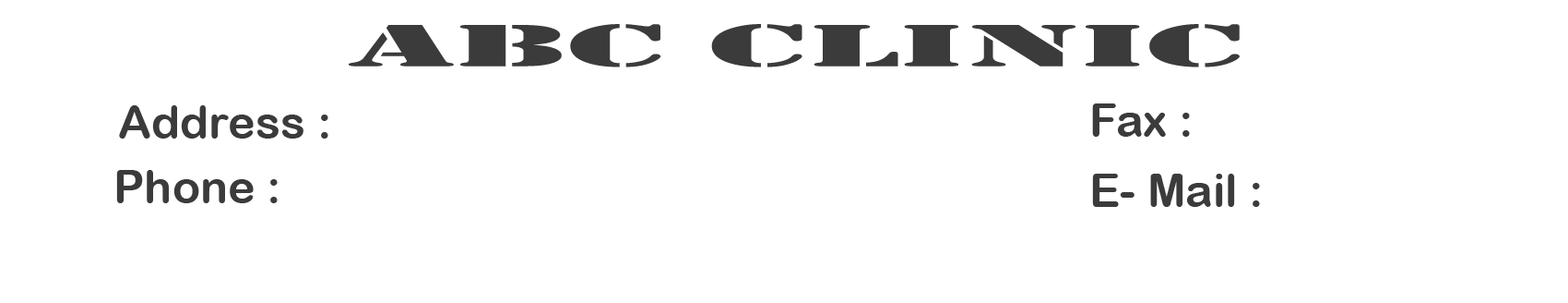
<style>
.page{position:relative;width:1568px;height:303px;background:#ffffff}
.page>*{position:absolute;margin:0}
.t1{font:61.5px "Stencil";color:#3b3b3b;scale:2.76 1}
.t2{font:46.1px "ArialRoundedMTBold";color:#3b3b3b}
.t3{font:46.3px "ArialRoundedMTBold";color:#3b3b3b}
</style>
<div class="page">
<p class="t1" style="left:349px;top:24px;width:891px;height:43px">ABC Clinic</p>
<p class="t2" style="left:119px;top:105px;width:209px;height:33px">Address :</p>
<p class="t3" style="left:1092px;top:103px;width:98px;height:34px">Fax :</p>
<p class="t2" style="left:116px;top:170px;width:162px;height:33px">Phone :</p>
<p class="t2" style="left:1092px;top:173px;width:168px;height:34px">E- Mail :</p>
</div>
